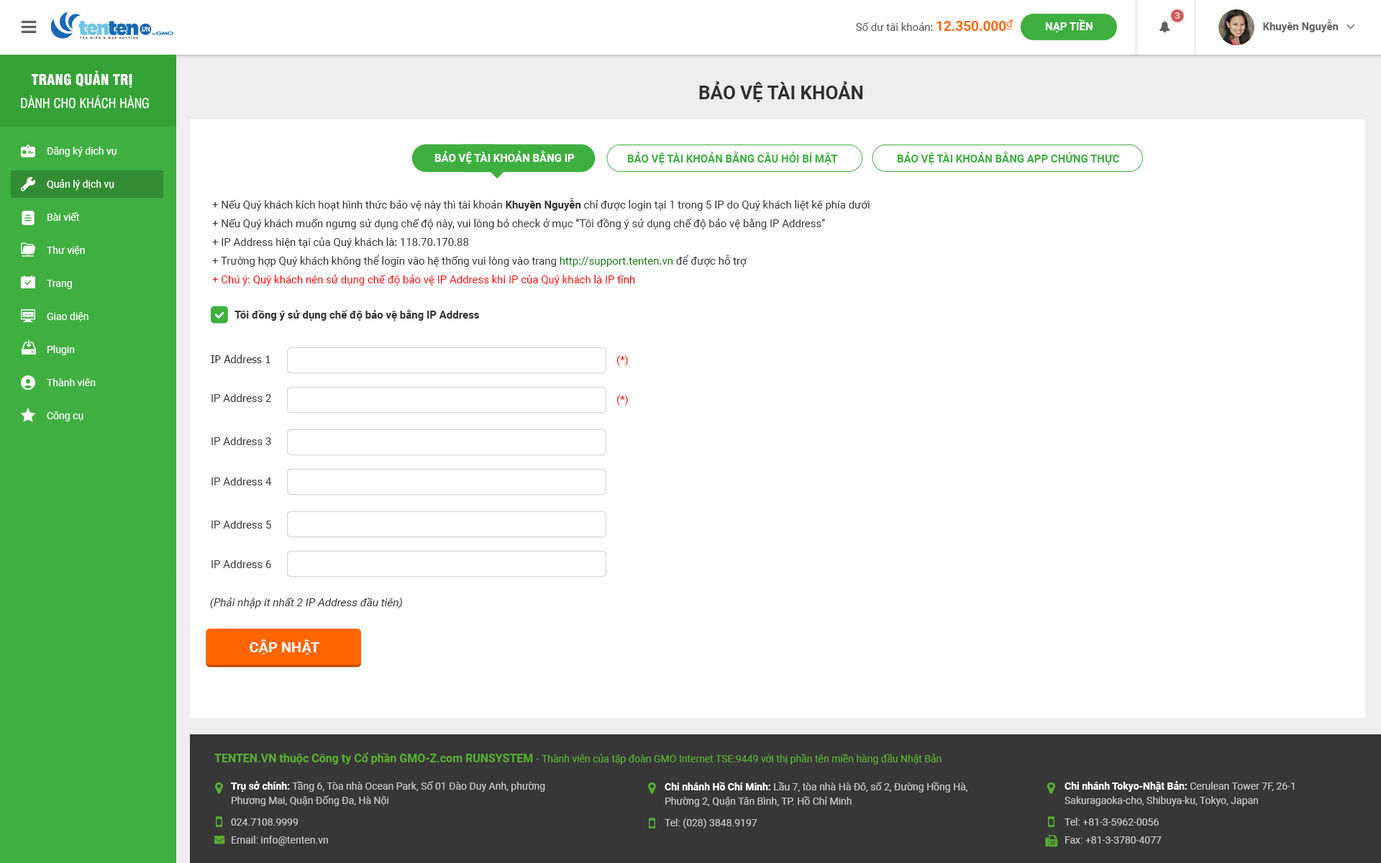
<style>
.page{position:relative;width:1381px;height:863px;background:#ffffff}
.page>*{position:absolute;margin:0}
.t1{font:8.6px "Roboto-Regular";color:#ffffff;text-transform:uppercase}
.t2{font:10.8px "Roboto-Regular";color:#4e4e4e}
.t3{font:13.7px "Roboto-Bold";color:#ff6600}
.t4{font:10.8px "Roboto-Regular";color:#ff6600;text-decoration:underline}
.t5{font:10.8px "Roboto-Bold";color:#ffffff}
.t6{font:10.8px "Roboto-Bold";color:#616161}
.t7{font:14.4px "UTM-Swiss-721-Black-Condensed";color:#ffffff;text-transform:uppercase}
.t8{font:18.7px "Roboto-Bold";color:#303030;text-transform:uppercase}
.t9{font:12.9px "UTM-Swiss-Condensed";color:#ffffff;text-transform:uppercase}
.t10{font:10.1px/33.1px "Roboto-Regular";color:#ffffff}
.t11{font:10.8px "Roboto-Bold";color:#ffffff;text-transform:uppercase}
.t12{font:10.8px "Roboto-Bold";color:#3faf40;text-transform:uppercase}
.t13{font:10.8px/18.7px "Roboto-Regular";color:#303030}
.t14{font:10.8px/18.7px "Roboto-Bold";color:#303030}
.t15{font:10.8px/18.7px "Roboto-Regular";color:#0e7b0f}
.t16{font:10.8px/18.7px "Roboto-Regular";color:#ff0000}
.t17{font:10.8px "Roboto-Bold";color:#303030}
.t18{font:10.8px "Tahoma";color:#303030}
.t19{font:10.8px "Roboto-Regular";color:#ff0000}
.t20{font:10.8px "Roboto-Regular";color:#303030}
.t21{font:10.8px "Roboto-Regular";color:#303030;font-style:italic}
.t22{font:14.4px "Roboto-Bold";color:#ffffff;text-transform:uppercase}
.t23{font:10.1px "Roboto-Regular";color:#57ae31}
.t24{font:11.5px "Roboto-Bold";color:#57ae31}
.t25{font:10.1px/14.4px "Roboto-Regular";color:#c4c4c4}
.t26{font:10.1px/14.4px "Roboto-Bold";color:#ffffff}
.t27{font:10.1px/21.6px "Roboto-Regular";color:#c4c4c4}
.t28{font:10.1px/18px "Roboto-Regular";color:#c4c4c4}
</style>
<div class="page">
<p class="t1" style="left:1175px;top:12px;width:5px;height:7px">3</p>
<p class="t2" style="left:856px;top:19px;width:158px;height:12px">Số dư tài khoản: <span class="t3">12.350.000</span><span class="t4">đ</span></p>
<p class="t5" style="left:1045px;top:19px;width:48px;height:13px">NẠP TIỀN</p>
<p class="t6" style="left:1263px;top:19px;width:76px;height:13px">Khuyên Nguyễn</p>
<p class="t7" style="left:32px;top:71px;width:100px;height:17px">Trang quản trị</p>
<p class="t8" style="left:699px;top:81px;width:164px;height:21px">bảo vệ tài khoản</p>
<p class="t9" style="left:21px;top:95px;width:128px;height:14px">Dành cho Khách hàng</p>
<p class="t10" style="left:46px;top:147px;width:71px;height:275px">Đăng ký dịch vụ<br>Quản lý dịch vụ<br>Bài viết<br>Thư viện<br>Trang<br>Giao diện<br>Plugin<br>Thành viên<br>Công cụ</p>
<p class="t11" style="left:435px;top:150px;width:140px;height:14px">bảo vệ tài khoản bằng ip</p>
<p class="t12" style="left:627px;top:151px;width:211px;height:14px">bảo vệ tài khoản bằng câu hỏi bí mật</p>
<p class="t12" style="left:897px;top:151px;width:223px;height:14px">bảo vệ tài khoản bằng app chứng thực</p>
<p class="t13" style="left:212px;top:198px;width:658px;height:88px">+ Nếu Quý khách kích hoạt hình thức bảo vệ này thì tài khoản <span class="t14">Khuyên Nguyễn</span> chỉ được login tại 1 trong 5 IP do Quý khách liệt kê phía dưới<br>+ Nếu Quý khách muốn ngưng sử dụng chế độ này, vui lòng bỏ check ở mục “Tôi đồng ý sử dụng chế độ bảo vệ bằng IP Address”<br>+ IP Address hiện tại của Quý khách là: 118.70.170.88<br>+ Trường hợp Quý khách không thể login vào hệ thống vui lòng vào trang <span class="t15">http://support.tenten.vn</span> để được hỗ trợ<br><span class="t16">+ Chú ý: Quý khách nên sử dụng chế độ bảo vệ IP Address khi IP của Quý khách là IP tĩnh</span></p>
<p class="t17" style="left:235px;top:309px;width:244px;height:12px">Tôi đồng ý sử dụng chế độ bảo vệ bằng IP Address</p>
<p class="t18" style="left:211px;top:355px;width:59px;height:8px">IP Address 1</p>
<p class="t19" style="left:617px;top:355px;width:11px;height:11px">(*)</p>
<p class="t20" style="left:212px;top:394px;width:59px;height:8px">IP Address 2</p>
<p class="t19" style="left:617px;top:395px;width:11px;height:11px">(*)</p>
<p class="t20" style="left:212px;top:437px;width:59px;height:8px">IP Address 3</p>
<p class="t20" style="left:212px;top:478px;width:60px;height:8px">IP Address 4</p>
<p class="t20" style="left:212px;top:521px;width:59px;height:8px">IP Address 5</p>
<p class="t20" style="left:212px;top:560px;width:59px;height:8px">IP Address 6</p>
<p class="t21" style="left:210px;top:598px;width:192px;height:11px">(Phải nhập ít nhất 2 IP Address đầu tiên)</p>
<p class="t22" style="left:250px;top:640px;width:69px;height:15px">cập nhật</p>
<p class="t23" style="left:214px;top:753px;width:728px;height:12px"><span class="t24">TENTEN.VN thuộc Công ty Cổ phần GMO-Z.com RUNSYSTEM </span>- Thành viên của tập đoàn GMO Internet TSE:9449 với thị phần tên miền hàng đầu Nhật Bản</p>
<p class="t25" style="left:231px;top:781px;width:314px;height:65px"><span class="t26">Trụ sở chính:</span> Tầng 6, Tòa nhà Ocean Park, Số 01 Đào Duy Anh, phường Phương Mai, Quận Đống Đa, Hà Nội<br><span class="t27">024.7108.9999<br></span><span class="t28">Email: info@tenten.vn</span></p>
<p class="t25" style="left:665px;top:782px;width:303px;height:47px"><span class="t26">Chi nhánh Hồ Chí Minh: </span>Lầu 7, tòa nhà Hà Đô, số 2, Đường Hồng Hà, Phường 2, Quận Tân Bình, TP. Hồ Chí Minh<br><span class="t27">Tel: (028) 3848.9197</span></p>
<p class="t25" style="left:1065px;top:781px;width:230px;height:63px"><span class="t26">Chi nhánh Tokyo-Nhật Bản:</span> Cerulean Tower 7F, 26-1 Sakuragaoka-cho, Shibuya-ku, Tokyo, Japan <br><span class="t27">Tel: +81-3-5962-0056<br></span><span class="t28">Fax: +81-3-3780-4077</span></p>
</div>
